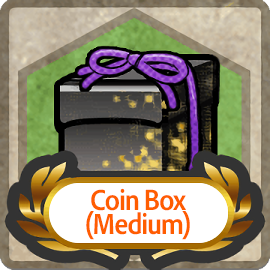
<style>
.page{position:relative;width:270px;height:270px}
.page>*{position:absolute;margin:0}
.t1{font:30px/24px "AdobeClean-Bold";letter-spacing:-0.04em;color:#ff5d00;scale:0.9 1}
</style>
<div class="page">
<p class="t1" style="left:86px;top:188px;width:104px;height:52px;text-align:center">Coin Box<br>(Medium)</p>
</div>
